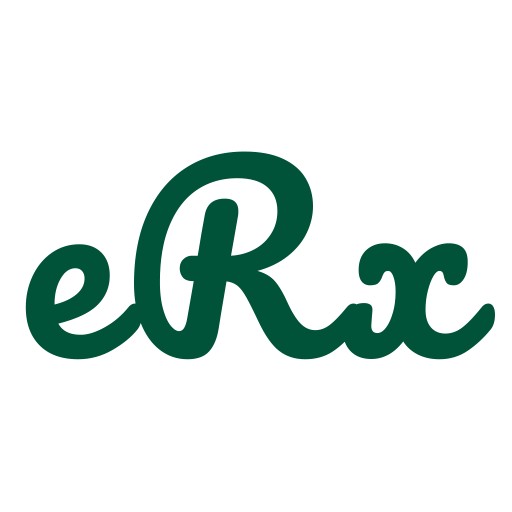
<style>
.page{position:relative;width:512px;height:512px;background:#ffffff}
.page>*{position:absolute;margin:0}
.t1{font:244.1px "Pacifico-Regular";letter-spacing:0.04em;color:#005239}
</style>
<div class="page">
<p class="t1" style="left:25px;top:151px;width:470px;height:209px">eRx</p>
</div>
